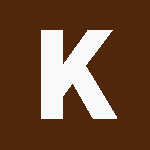
<style>
.page{position:relative;width:150px;height:150px;background:#50270a}
.page>*{position:absolute;margin:0}
.t1{font:120px "NotoSansCJKkr-Black";letter-spacing:-0.025em;color:#f8f9fb}
</style>
<div class="page">
<p class="t1" style="left:41px;top:30px;width:76px;height:89px">K</p>
</div>
